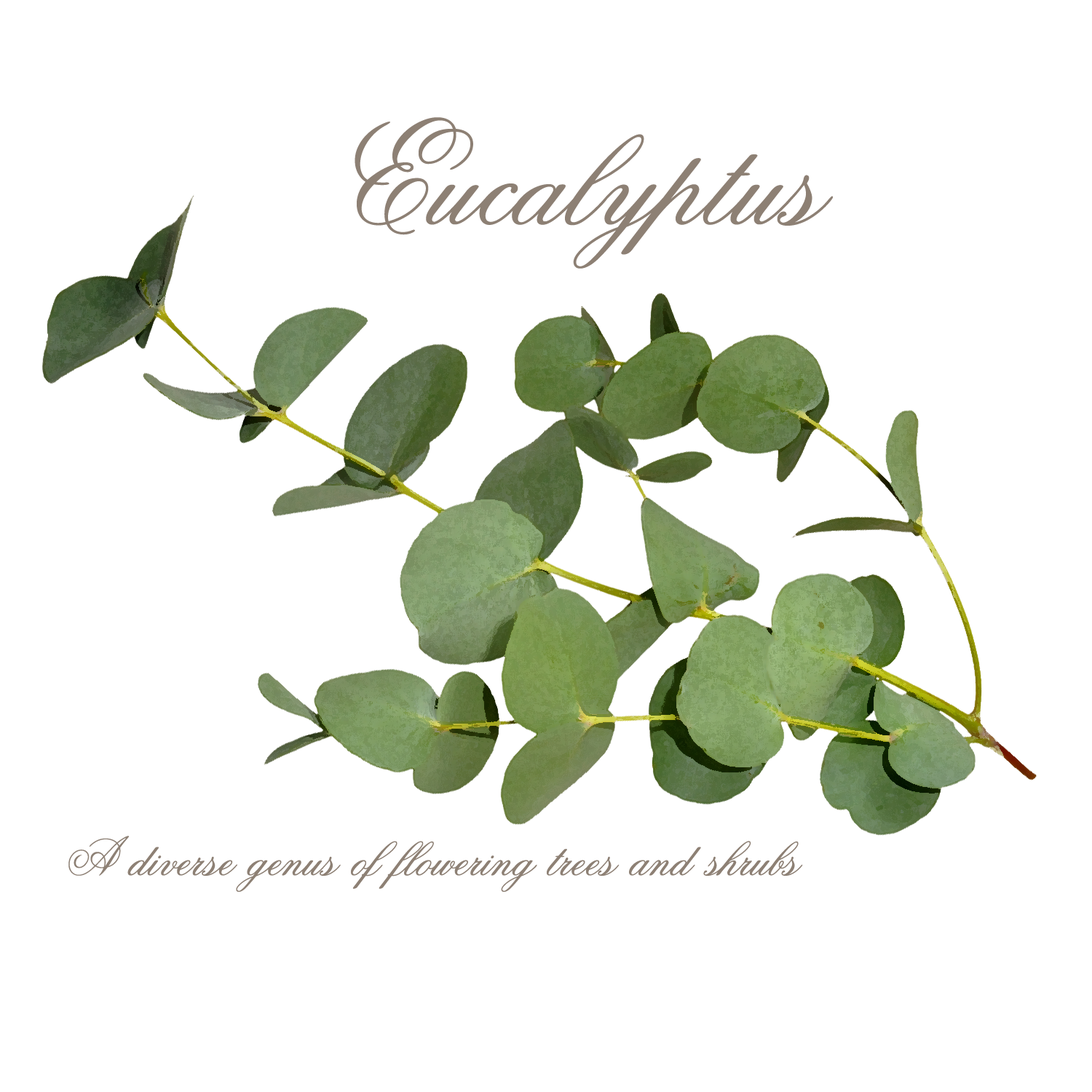
<style>
.page{position:relative;width:1092px;height:1092px;background:#ffffff}
.page>*{position:absolute;margin:0}
.t1{font:145.6px "Old-Scrip";color:#8d8074}
.t2{font:54.6px "Old-Scrip";color:#8d8074}
</style>
<div class="page">
<p class="t1" style="left:355px;top:117px;width:478px;height:152px">Eucalyptus</p>
<p class="t2" style="left:68px;top:836px;width:735px;height:56px">A diverse genus of flowering trees and shrubs</p>
</div>
